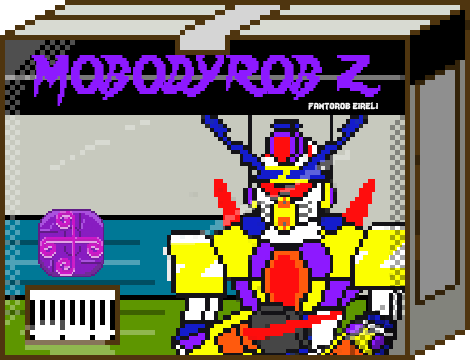
<style>
.page{position:relative;width:470px;height:360px}
.page>*{position:absolute;margin:0}
.t1{font:48px "Lady-Radical";color:#8d19ff;scale:0.72 1}
.t2{font:12px "Lady-Radical";color:#fbfbfb}
</style>
<div class="page">
<p class="t1" style="left:31px;top:55px;width:350px;height:51px">MOBODYROB  Z</p>
<p class="t2" style="left:308px;top:102px;width:70px;height:8px">fantorob eireli</p>
</div>
